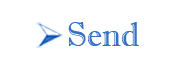
<style>
.page{position:relative;width:170px;height:70px;background:#ffffff}
.page>*{position:absolute;margin:0}
.t1{font:33.9px "ImprintMT-Shadow";color:#3372c4}
.t2{font:33.9px "MonotypeCorsiva";color:#3372c4}
</style>
<div class="page">
<p class="t1" style="left:68px;top:22px;width:71px;height:24px"><span class="t2">      </span>Send</p>
</div>
